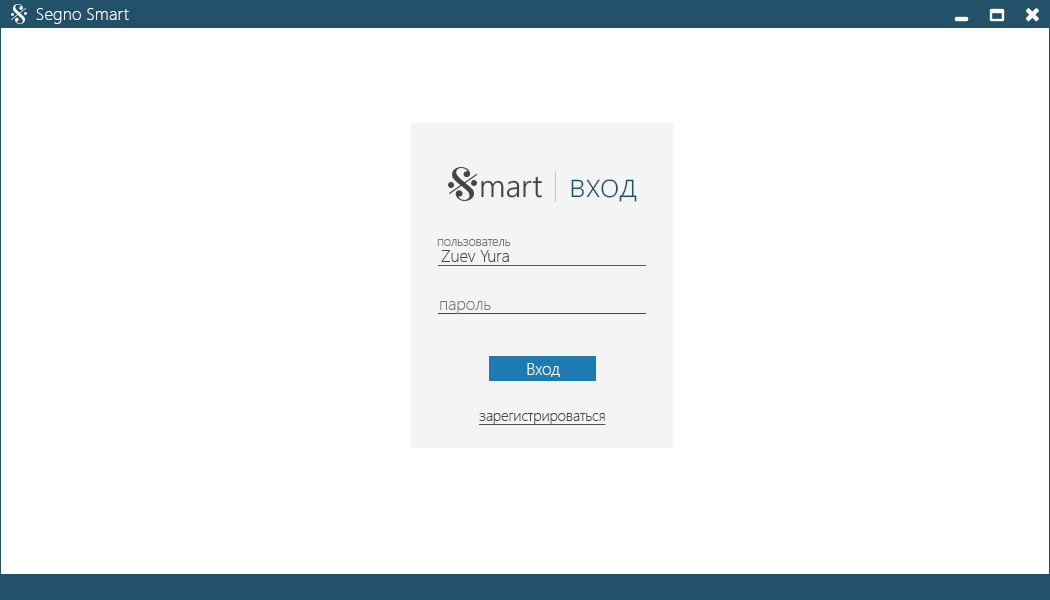
<style>
.page{position:relative;width:1050px;height:600px;background:#ffffff}
.page>*{position:absolute;margin:0}
.t1{font:17.2px "SegoeUI-Light";color:#ffffff}
.t2{font:31.5px "SegoeUI-Semilight";color:#454545}
.t3{font:34.3px "SegoeUI-Light";color:#225169}
.t4{font:12.5px "SegoeUI-Light";color:#787878}
.t5{font:16.7px "SegoeUI-Light";color:#454545}
.t6{font:16.7px "SegoeUI-Light";color:#787878}
.t7{font:16.7px "SegoeUI-Light";color:#ffffff}
.t8{font:14.6px "SegoeUI-Light";color:#454545;text-decoration:underline}
</style>
<div class="page">
<p class="t1" style="left:36px;top:8px;width:93px;height:16px">Segno Smart</p>
<p class="t2" style="left:481px;top:176px;width:61px;height:22px">mart</p>
<p class="t3" style="left:571px;top:179px;width:66px;height:23px">вход</p>
<p class="t4" style="left:437px;top:239px;width:74px;height:7px">пользователь</p>
<p class="t5" style="left:441px;top:250px;width:68px;height:12px">Zuev Yura</p>
<p class="t6" style="left:440px;top:301px;width:51px;height:13px">пароль</p>
<p class="t7" style="left:527px;top:363px;width:33px;height:14px">Вход</p>
<p class="t8" style="left:479px;top:413px;width:127px;height:12px">зарегистрироваться</p>
</div>
